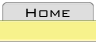
<style>
.page{position:relative;width:96px;height:45px;background:#f7f28c}
.page>*{position:absolute;margin:0}
.t1{font:16.2px "BankGothicBT-Light";color:#000000}
</style>
<div class="page">
<p class="t1" style="left:26px;top:8px;width:44px;height:9px">Home</p>
</div>
